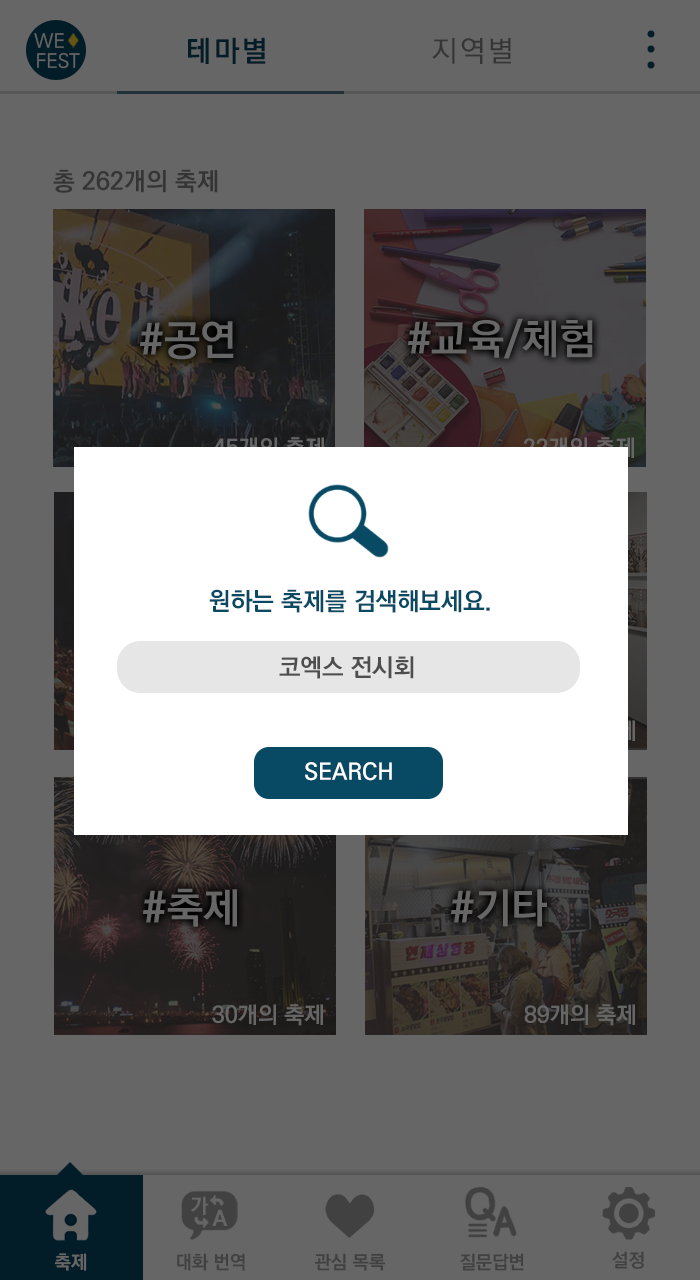
<style>
.page{position:relative;width:700px;height:1280px;background:#666666}
.page>*{position:absolute;margin:0}
.t1{font:19.3px "KoPubDotumMedium";color:#666666}
.t2{font:29.2px "KoPubDotumBold";letter-spacing:0.1em;color:#031d28}
.t3{font:29.2px "KoPubDotumMedium";letter-spacing:0.1em;color:#353535}
.t4{font:25px "KoPubDotumBold";color:#353535}
.t5{font:41.7px "KoPubDotumBold";color:#666666}
.t6{font:25px "KoPubDotumBold";color:#084964}
.t7{font:24.7px "KoPubDotumBold";color:#4e4e4e}
.t8{font:22.9px "KoPubDotumBold";color:#ffffff}
.t9{font:22.9px "KoPubDotumBold";color:#666666}
.t10{font:18.8px "KoPubDotumBold";color:#666666}
.t11{font:18.8px "KoPubDotumBold";color:#414141}
</style>
<div class="page">
<p class="t1" style="left:34px;top:33px;width:30px;height:15px">WE</p>
<p class="t2" style="left:188px;top:37px;width:78px;height:27px">테마별</p>
<p class="t3" style="left:432px;top:38px;width:79px;height:26px">지역별</p>
<p class="t1" style="left:37px;top:52px;width:43px;height:17px">FEST</p>
<p class="t4" style="left:53px;top:169px;width:165px;height:24px">총 262개의 축제</p>
<p class="t5" style="left:408px;top:318px;width:185px;height:41px">#교육/체험</p>
<p class="t5" style="left:140px;top:321px;width:94px;height:39px">#공연</p>
<p class="t6" style="left:209px;top:589px;width:281px;height:24px">원하는 축제를 검색해보세요.</p>
<p class="t7" style="left:279px;top:656px;width:135px;height:23px">코엑스 전시회</p>
<p class="t8" style="left:305px;top:762px;width:87px;height:19px">SEARCH</p>
<p class="t5" style="left:143px;top:888px;width:94px;height:39px">#축제</p>
<p class="t5" style="left:451px;top:889px;width:96px;height:38px">#기타</p>
<p class="t9" style="left:212px;top:1004px;width:111px;height:22px">30개의 축제</p>
<p class="t9" style="left:524px;top:1004px;width:111px;height:22px">89개의 축제</p>
<p class="t10" style="left:54px;top:1253px;width:33px;height:18px">축제</p>
<p class="t10" style="left:54px;top:1253px;width:33px;height:18px">축제</p>
<p class="t11" style="left:177px;top:1253px;width:68px;height:18px">대화 번역</p>
<p class="t11" style="left:177px;top:1253px;width:68px;height:18px">대화 번역</p>
<p class="t11" style="left:314px;top:1253px;width:72px;height:18px">관심 목록</p>
<p class="t11" style="left:314px;top:1253px;width:72px;height:18px">관심 목록</p>
<p class="t11" style="left:460px;top:1253px;width:64px;height:18px">질문답변</p>
<p class="t11" style="left:460px;top:1253px;width:64px;height:18px">질문답변</p>
<p class="t11" style="left:612px;top:1251px;width:32px;height:18px">설정</p>
<p class="t11" style="left:612px;top:1251px;width:32px;height:18px">설정</p>
</div>
